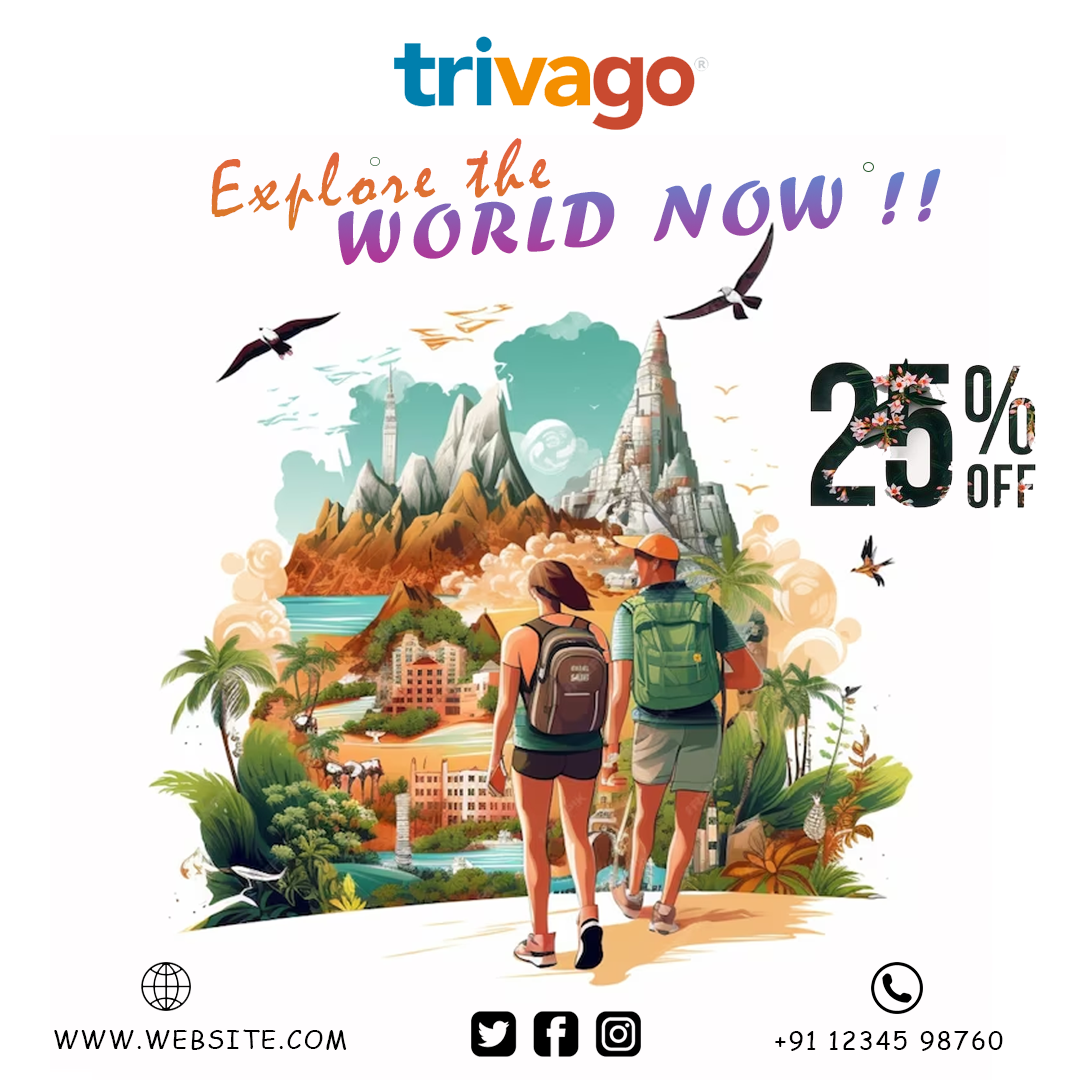
<style>
.page{position:relative;width:1080px;height:1080px;background:#fffdfe}
.page>*{position:absolute;margin:0}
.t1{font:80.3px "Mistral";letter-spacing:0.08em;color:#df6e33}
.t2{font:80.3px "ForteMT";letter-spacing:0.08em}
.t3{font:24.8px "ComicSansMS";letter-spacing:0.08em;color:#000000}
</style>
<div class="page">
<p class="t1" style="left:211px;top:138px;width:340px;height:93px;rotate:-4deg">Explore the</p>
<p class="t2" style="left:338px;top:168px;width:603px;height:97px;rotate:-4deg">WORLD NOW !!</p>
<p class="t3" style="left:54px;top:1029px;width:293px;height:21px">WWW.WEBSITE.COM</p>
<p class="t3" style="left:775px;top:1031px;width:228px;height:20px">+91 12345 98760</p>
</div>
